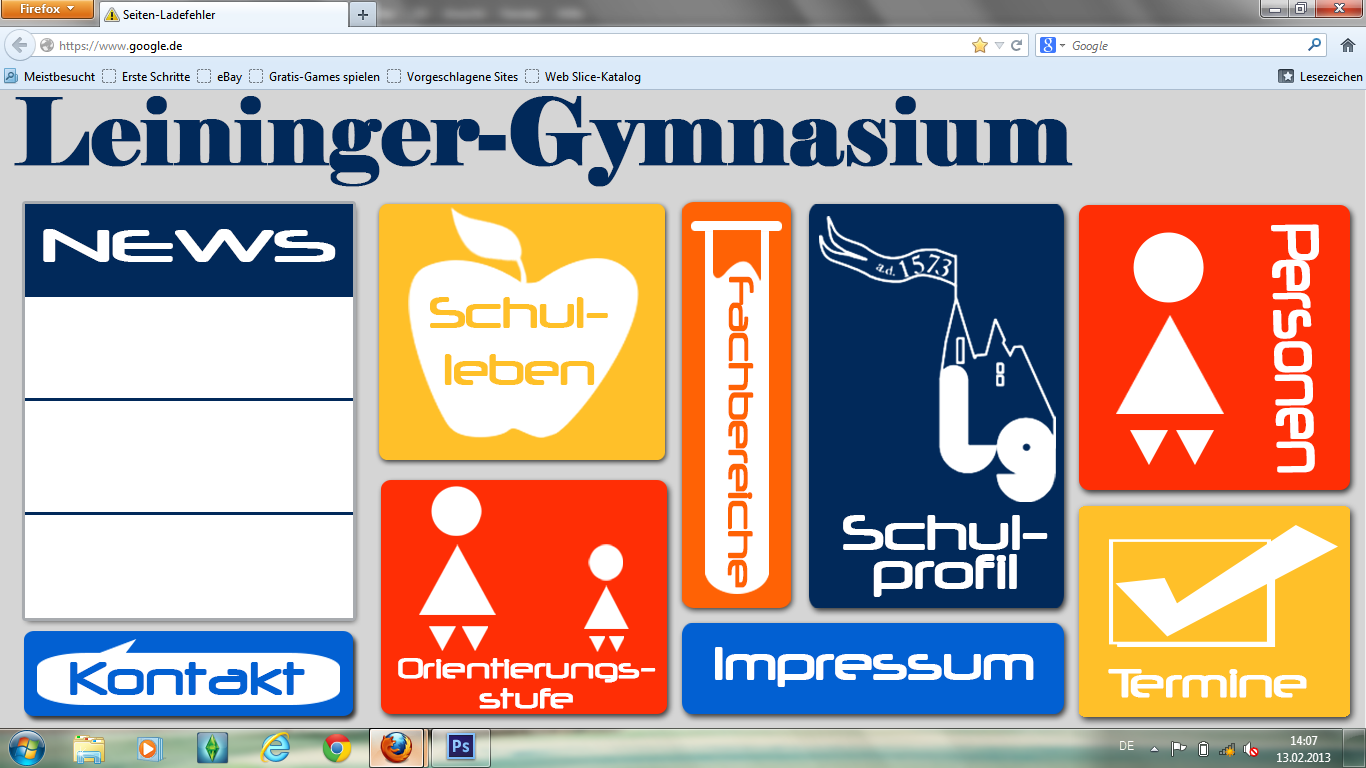
<style>
.page{position:relative;width:1366px;height:768px;background:#ffffff}
.page>*{position:absolute;margin:0}
.t1{font:91.8px "Elephant-Regular";letter-spacing:-0.01em;color:#01295a;font-weight:bold}
.t2{font:52.7px "Neuropol";letter-spacing:-0.01em;color:#ffffff;font-weight:bold;scale:1.62 1}
.t3{font:78.1px "Neuropol";letter-spacing:-0.01em;color:#ffffff;font-weight:bold;scale:0.6 1}
.t4{font:40.4px "Neuropol";letter-spacing:-0.01em;color:#ff6204;font-weight:bold}
.t5{font:49.7px/14.1px "Neuropol";letter-spacing:-0.01em;color:#ffc028;font-weight:bold}
.t6{font:57.1px/13px "Neuropol";letter-spacing:-0.01em;color:#ffffff;font-weight:bold}
.t7{font:53.9px "Neuropol";letter-spacing:-0.01em;color:#ffffff;font-weight:bold}
.t8{font:54.3px "Neuropol";letter-spacing:-0.01em;color:#0260d2;font-weight:bold}
.t9{font:33px/15px "Neuropol";letter-spacing:-0.01em;color:#ffffff;font-weight:bold}
.t10{font:48.4px "Neuropol";letter-spacing:-0.01em;color:#ffffff;font-weight:bold}
</style>
<div class="page">
<p class="t1" style="left:14px;top:96px;width:1059px;height:91px">Leininger-Gymnasium</p>
<p class="t2" style="left:43px;top:229px;width:293px;height:33px">NEWS</p>
<p class="t3" style="left:1271px;top:224px;width:48px;height:249px;rotate:89deg">Personen</p>
<p class="t4" style="left:727px;top:276px;width:27px;height:312px;rotate:90deg">Fachbereiche</p>
<p class="t5" style="left:430px;top:297px;width:178px;height:88px;text-align:center">Schul-<br><br><br><br>leben</p>
<p class="t6" style="left:843px;top:515px;width:205px;height:82px;text-align:center">Schul-<br><br><br>profil</p>
<p class="t7" style="left:715px;top:647px;width:319px;height:40px">Impressum</p>
<p class="t8" style="left:70px;top:662px;width:235px;height:33px">Kontakt</p>
<p class="t9" style="left:398px;top:658px;width:258px;height:51px;text-align:center">Orientierungs-<br><br>stufe</p>
<p class="t10" style="left:1108px;top:669px;width:199px;height:29px">Termine</p>
</div>
